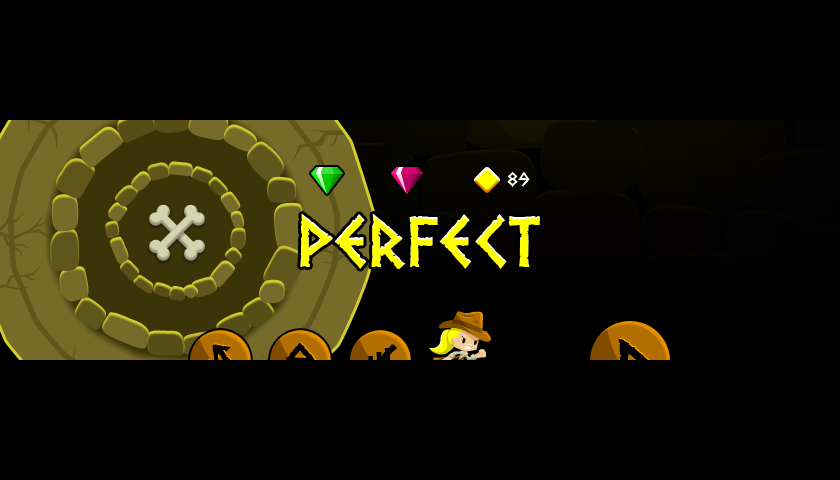
<style>
.page{position:relative;width:840px;height:480px;background:#000000}
.page>*{position:absolute;margin:0}
.t1{font:16px "Dalek";color:#ffffff}
.t2{font:70px "Dalek";color:#ffff00}
.t3{font:36px "Dalek";color:#000000;text-transform:uppercase;font-weight:bold}
.t4{font:50px "Dalek";color:#000000;text-transform:uppercase;font-weight:bold}
</style>
<div class="page">
<p class="t1" style="left:507px;top:172px;width:23px;height:15px">89</p>
<p class="t2" style="left:300px;top:214px;width:240px;height:55px">perfect</p>
<p class="t3" style="left:283px;top:342px;width:34px;height:23px;rotate:-90deg">d</p>
<p class="t4" style="left:618px;top:339px;width:31px;height:45px">d</p>
</div>
